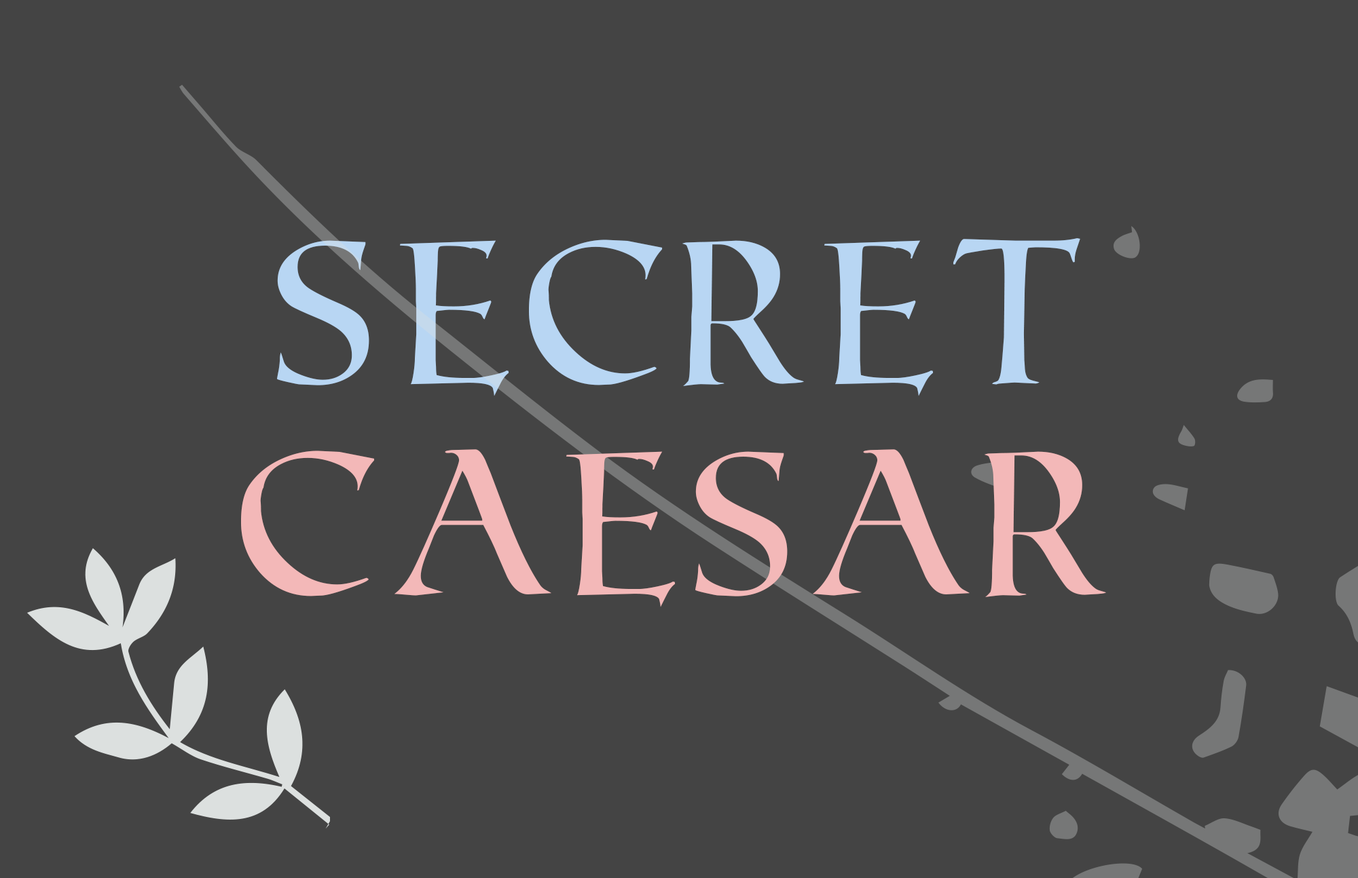
<style>
.page{position:relative;width:1358px;height:878px;background:#444444}
.page>*{position:absolute;margin:0}
.t1{font:204.8px "RomanSD";color:#b8d6f3}
.t2{font:204.8px "RomanSD";color:#f3b8b8}
</style>
<div class="page">
<p class="t1" style="left:277px;top:238px;width:803px;height:158px">SECRET</p>
<p class="t2" style="left:241px;top:449px;width:865px;height:159px">CAESAR</p>
</div>
